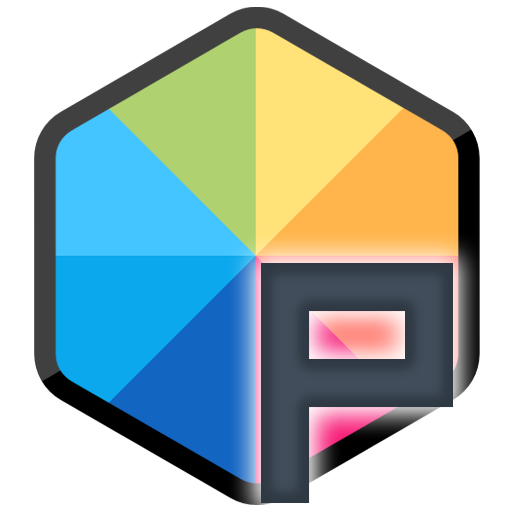
<style>
.page{position:relative;width:512px;height:512px;background:#ffffff}
.page>*{position:absolute;margin:0}
.t1{font:384px "Hooge0555";color:#3a4652}
</style>
<div class="page">
<p class="t1" style="left:261px;top:263px;width:192px;height:240px">P</p>
</div>
